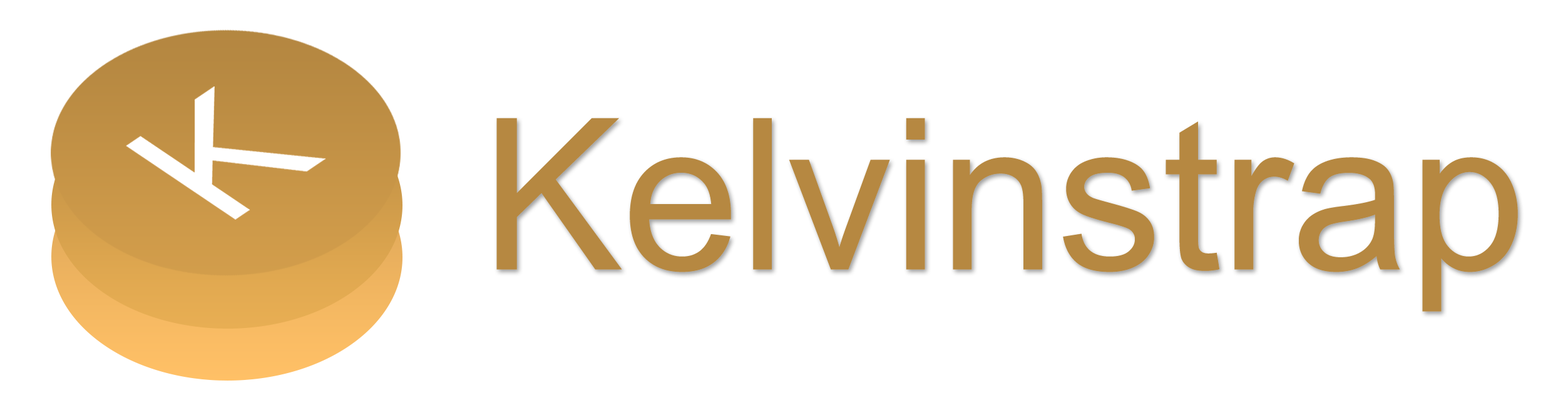
<style>
.page{position:relative;width:1568px;height:410px;background:#ffffff}
.page>*{position:absolute;margin:0}
.t1{font:211.2px "ArialMT";color:#b68841}
</style>
<div class="page">
<p class="t1" style="left:496px;top:118px;width:1022px;height:194px">Kelvinstrap</p>
</div>
